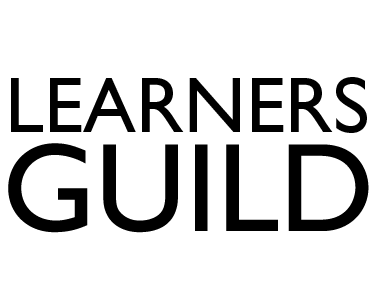
<style>
.page{position:relative;width:375px;height:300px;background:#ffffff}
.page>*{position:absolute;margin:0}
.t1{font:79.2px "GillSans";color:#000000}
.t2{font:126.7px "GillSans";color:#000000}
</style>
<div class="page">
<p class="t1" style="left:11px;top:77px;width:356px;height:56px">LEARNERS</p>
<p class="t2" style="left:8px;top:143px;width:361px;height:90px">GUILD</p>
</div>
